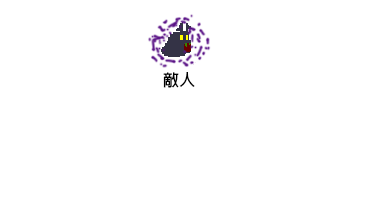
<style>
.page{position:relative;width:384px;height:216px;background:#ffffff}
.page>*{position:absolute;margin:0}
.t1{font:16px "AdobeFanHeitiStd-Bold";color:#000000}
</style>
<div class="page">
<p class="t1" style="left:163px;top:72px;width:32px;height:16px">敵人</p>
</div>
